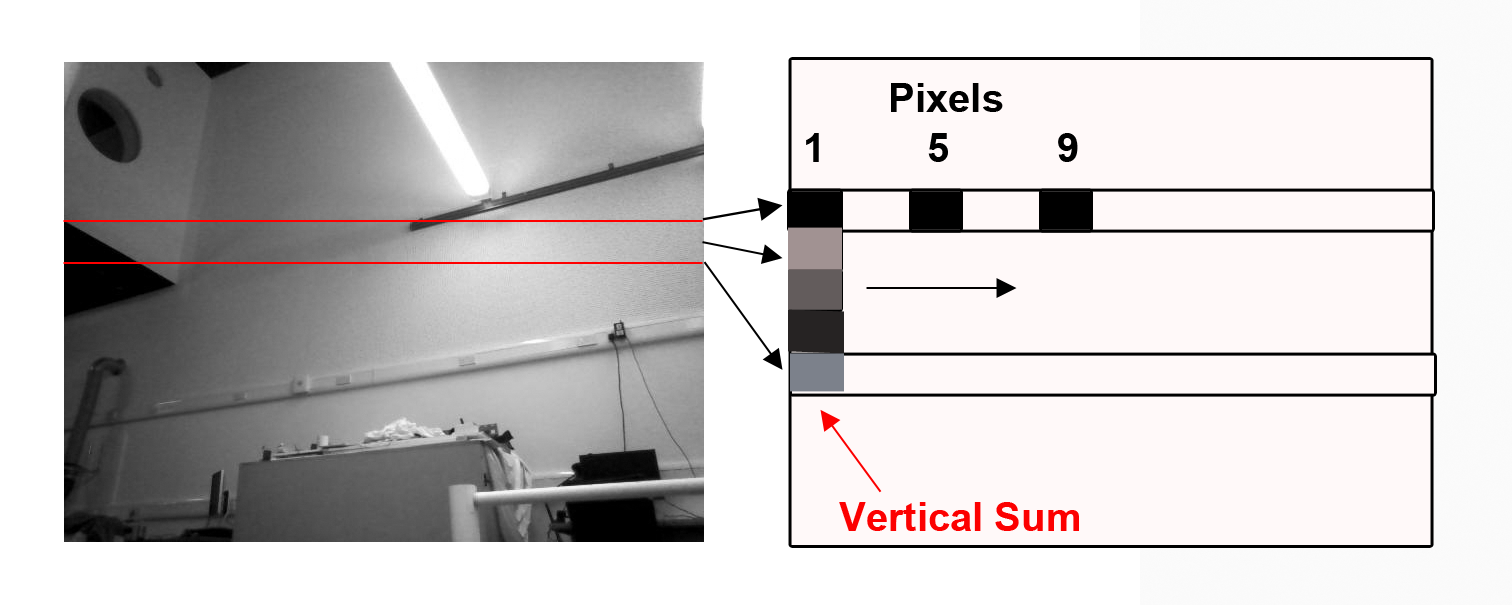
<style>
.page{position:relative;width:1512px;height:605px;background:#fff9f9}
.page>*{position:absolute;margin:0}
.t1{font:40px "Arial-BoldMT";color:#000000}
.t2{font:40px "Arial-BoldMT";color:#fc0000}
</style>
<div class="page">
<p class="t1" style="left:891px;top:83px;width:112px;height:29px">Pixels</p>
<p class="t1" style="left:806px;top:133px;width:13px;height:29px">1</p>
<p class="t1" style="left:928px;top:133px;width:20px;height:29px">5</p>
<p class="t1" style="left:1058px;top:133px;width:20px;height:29px">9</p>
<p class="t2" style="left:839px;top:502px;width:240px;height:29px">Vertical Sum</p>
</div>
